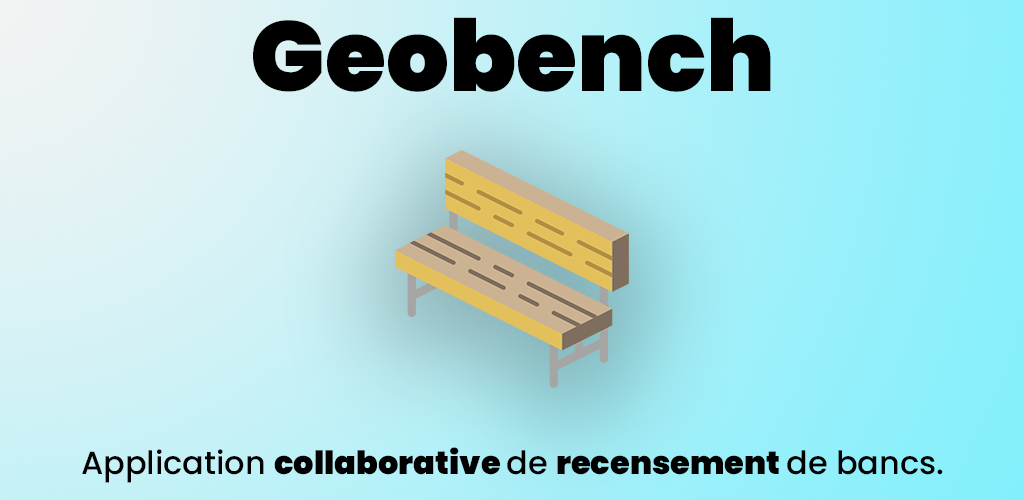
<style>
.page{position:relative;width:1024px;height:500px}
.page>*{position:absolute;margin:0}
.t1{font:99px "Poppins-Black";color:#000000}
.t2{font:32px "Poppins-Black";color:#000000}
.t3{font:32px "Poppins-Medium";color:#000000}
</style>
<div class="page">
<p class="t1" style="left:253px;top:17px;width:518px;height:75px">Geobench</p>
<p class="t2" style="left:82px;top:447px;width:861px;height:36px"><span class="t3">Application </span>collaborative <span class="t3">de </span>recensement <span class="t3">de bancs.</span></p>
</div>
